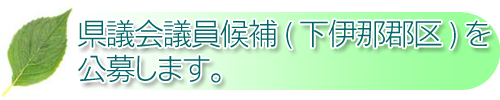
<style>
.page{position:relative;width:500px;height:100px;background:#ffffff}
.page>*{position:absolute;margin:0}
.t1{font:30px "NfMotoyaCedar-W1-90mskp-RKSJ-H";letter-spacing:-0.05em;color:#006666}
</style>
<div class="page">
<p class="t1" style="left:78px;top:19px;width:412px;height:30px">県議会議員候補(下伊那郡区)を</p>
<p class="t1" style="left:78px;top:54px;width:143px;height:29px">公募します。</p>
</div>
